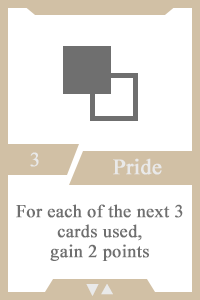
<style>
.page{position:relative;width:200px;height:300px;background:#ffffff}
.page>*{position:absolute;margin:0}
.t1{font:20px "TimesNewRomanPSMT";color:#e9e9e9;font-weight:bold}
.t2{font:22px "TimesNewRomanPSMT";color:#e9e9e9;font-weight:bold}
.t3{font:18px/20px "TimesNewRomanPSMT";color:#6f6f6f;font-weight:bold}
.t4{font:14px "AdobeHeitiStd-Regular";color:#e9e9e9;font-weight:bold}
</style>
<div class="page">
<p class="t1" style="left:30px;top:152px;width:9px;height:15px">3</p>
<p class="t2" style="left:113px;top:158px;width:49px;height:17px">Pride</p>
<p class="t3" style="left:16px;top:204px;width:167px;height:57px;text-align:center">For each of the next 3 cards used,<br>gain 2 points</p>
<p class="t4" style="left:86px;top:284px;width:27px;height:12px">▼▲</p>
</div>
